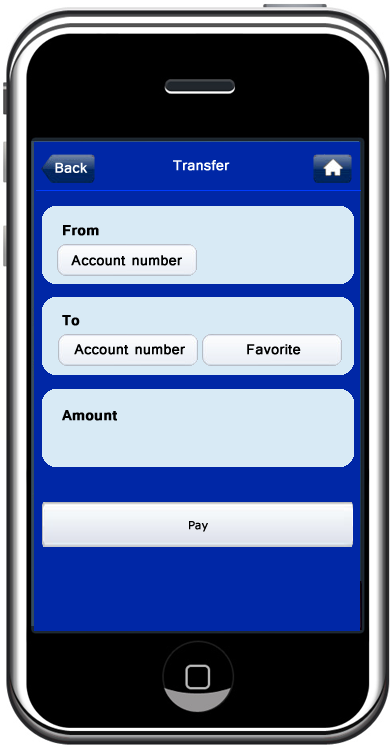
<style>
.page{position:relative;width:390px;height:747px;background:#0027a6}
.page>*{position:absolute;margin:0}
.t1{font:18px "Tunga";color:#ffffff;font-weight:bold}
.t2{font:18px/30px "Tunga";color:#000000;font-weight:bold}
.t3{font:18px/30px "Tunga-Bold";color:#000000;font-weight:bold}
.t4{font:18px/29px "Tunga";color:#000000;font-weight:bold}
.t5{font:18px/48px "Tunga-Bold";color:#000000;font-weight:bold}
.t6{font:18px "Tunga-Bold";color:#000000;font-weight:bold}
.t7{font:11px "Verdana";color:#000000;font-weight:bold}
</style>
<div class="page">
<p class="t1" style="left:173px;top:160px;width:57px;height:11px">Transfer</p>
<p class="t1" style="left:55px;top:162px;width:33px;height:11px">Back</p>
<p class="t2" style="left:63px;top:225px;width:119px;height:41px"><span class="t3">From<br>  </span>Account number</p>
<p class="t4" style="left:62px;top:315px;width:239px;height:40px"><span class="t5">To<br></span>  Account number          Favorite</p>
<p class="t6" style="left:62px;top:410px;width:55px;height:11px">Amount</p>
<p class="t7" style="left:189px;top:521px;width:19px;height:11px">Pay</p>
</div>
